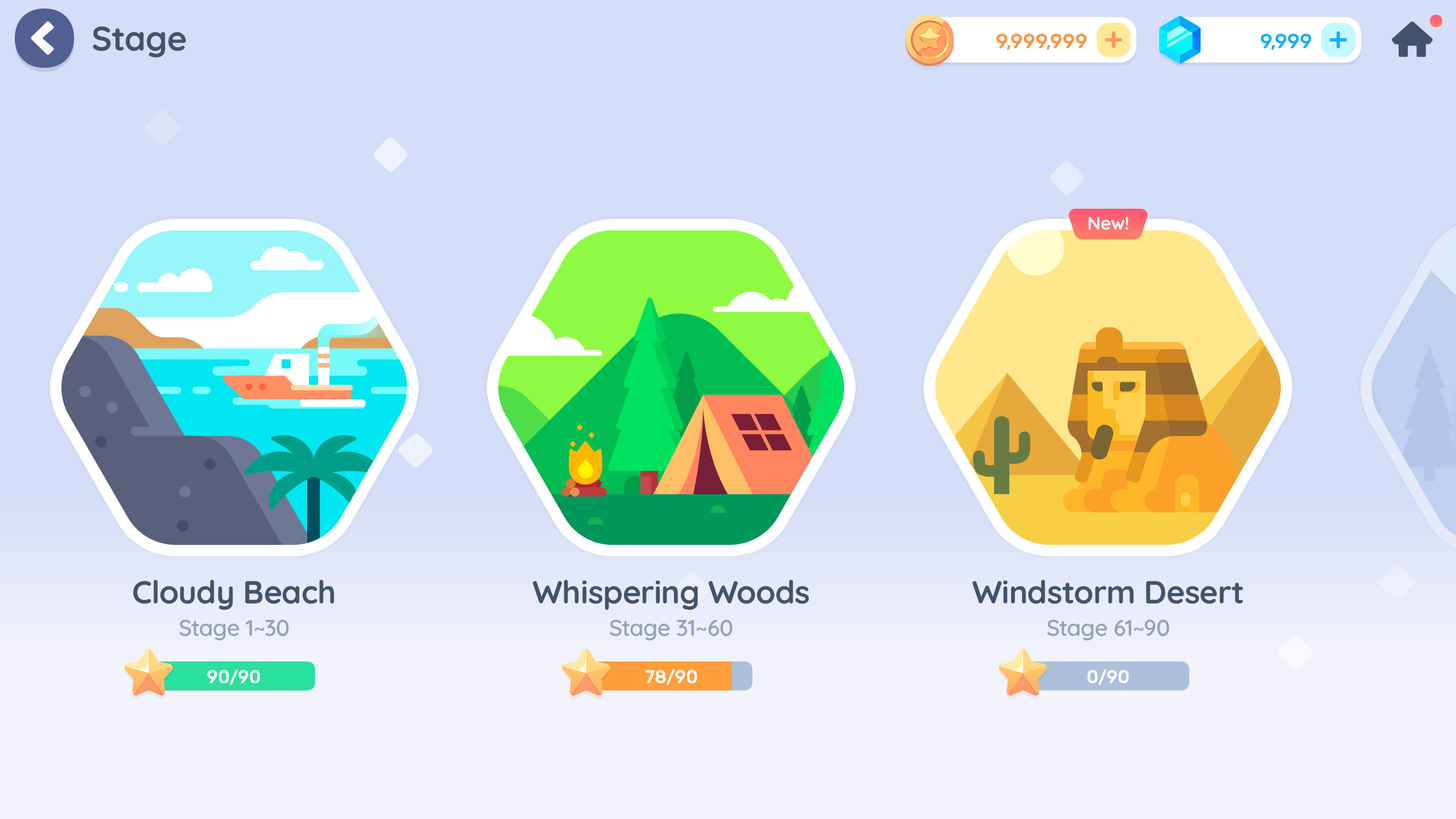
<style>
.page{position:relative;width:1456px;height:819px;background:#d4def8}
.page>*{position:absolute;margin:0}
.t1{font:34.1px "Quicksand-Bold";color:#43536c}
.t2{font:20.5px "Rubik-Medium";letter-spacing:-0.01em;color:#fd9744;text-transform:uppercase}
.t3{font:20.5px "Rubik-Medium";letter-spacing:-0.01em;color:#1cb0f6;text-transform:uppercase}
.t4{font:18.2px "Quicksand-Bold";letter-spacing:-0.01em;color:#ffffff}
.t5{font:31.8px "Quicksand-Bold";letter-spacing:-0.01em;color:#43536c}
.t6{font:22.7px "Quicksand-SemiBold";letter-spacing:-0.01em;color:#92a4b4}
.t7{font:18.2px "Rubik-Medium";color:#ffffff;text-transform:uppercase}
.t8{font:17.1px "Rubik-Medium";color:#ffffff;text-transform:uppercase}
</style>
<div class="page">
<p class="t1" style="left:93px;top:26px;width:93px;height:31px">Stage</p>
<p class="t2" style="left:996px;top:34px;width:91px;height:16px">9,999,999</p>
<p class="t3" style="left:1260px;top:34px;width:52px;height:16px">9,999</p>
<p class="t4" style="left:1089px;top:217px;width:39px;height:13px">New!</p>
<p class="t5" style="left:133px;top:580px;width:201px;height:30px">Cloudy Beach</p>
<p class="t5" style="left:533px;top:580px;width:276px;height:30px">Whispering Woods</p>
<p class="t5" style="left:973px;top:580px;width:270px;height:24px">Windstorm Desert</p>
<p class="t6" style="left:179px;top:619px;width:110px;height:21px">Stage 1~30</p>
<p class="t6" style="left:610px;top:619px;width:123px;height:21px">Stage 31~60</p>
<p class="t6" style="left:1047px;top:619px;width:122px;height:21px">Stage 61~90</p>
<p class="t7" style="left:207px;top:669px;width:53px;height:16px">90<span class="t8">/</span>90</p>
<p class="t7" style="left:645px;top:669px;width:52px;height:16px">78<span class="t8">/</span>90</p>
<p class="t7" style="left:1087px;top:669px;width:42px;height:16px">0<span class="t8">/</span>90</p>
</div>
